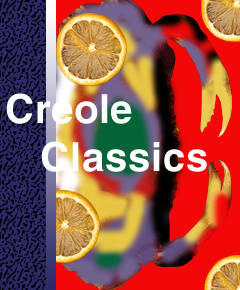
<style>
.page{position:relative;width:240px;height:290px}
.page>*{position:absolute;margin:0}
.t1{font:40px "VNI-Helve-Bold";color:#ffffff}
</style>
<div class="page">
<p class="t1" style="left:6px;top:93px;width:201px;height:79px">Creole<br>   Classics</p>
</div>
